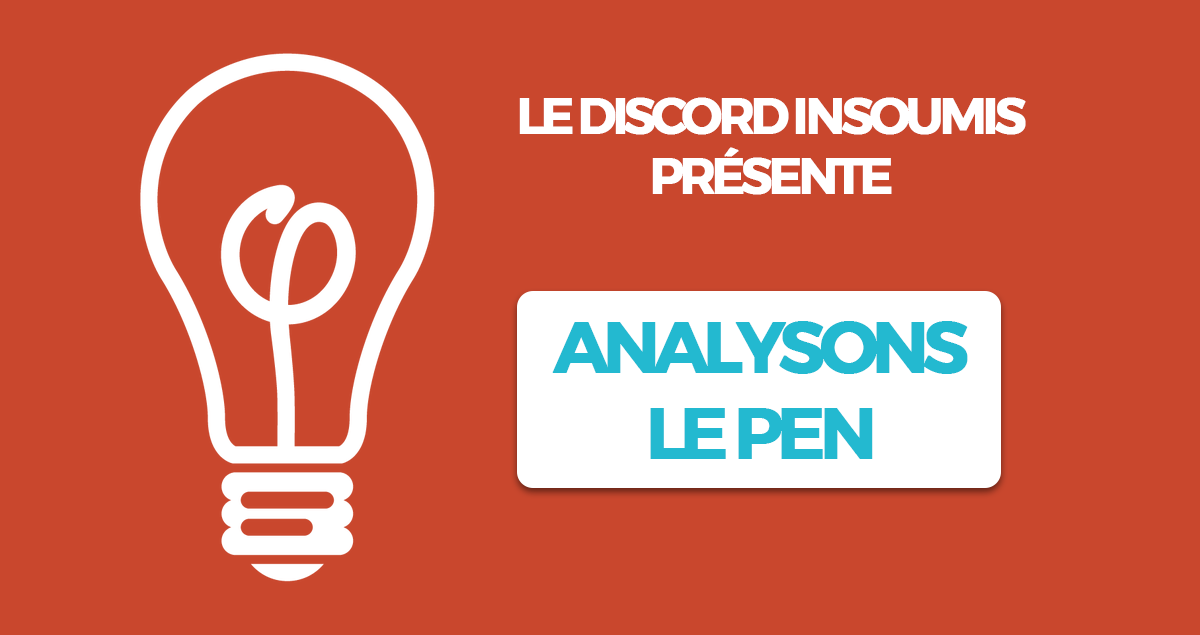
<style>
.page{position:relative;width:1200px;height:635px;background:#c9472d}
.page>*{position:absolute;margin:0}
.t1{font:50px "Montserrat-SemiBold";letter-spacing:-0.105em;color:#ffffff;font-weight:bold}
.t2{font:72px "Montserrat-SemiBold";letter-spacing:-0.105em;color:#23b9d0;font-weight:bold}
</style>
<div class="page">
<p class="t1" style="left:519px;top:97px;width:507px;height:98px;text-align:center">LE DISCORD INSOUMIS<br>PRÉSENTE</p>
<p class="t2" style="left:552px;top:321px;width:416px;height:138px;text-align:center">ANALYSONS<br>LE PEN</p>
</div>
